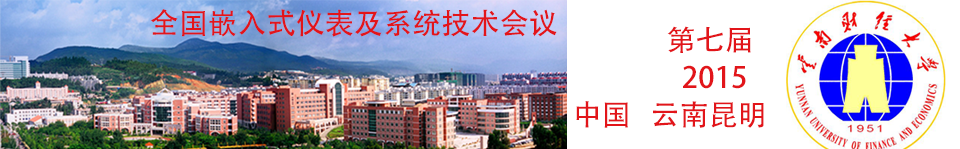
<style>
.page{position:relative;width:960px;height:149px;background:#ffffff}
.page>*{position:absolute;margin:0}
.t1{font:29.2px "AdobeHeitiStd-Regular";color:#e2151a}
.t2{font:29.2px/37.5px "AdobeHeitiStd-Regular";color:#e2151a}
</style>
<div class="page">
<p class="t1" style="left:150px;top:9px;width:407px;height:28px">全国嵌入式仪表及系统技术会议</p>
<p class="t2" style="left:576px;top:26px;width:188px;height:102px;text-align:right">第七届  <br>2015   <br>中国   云南昆明</p>
</div>
